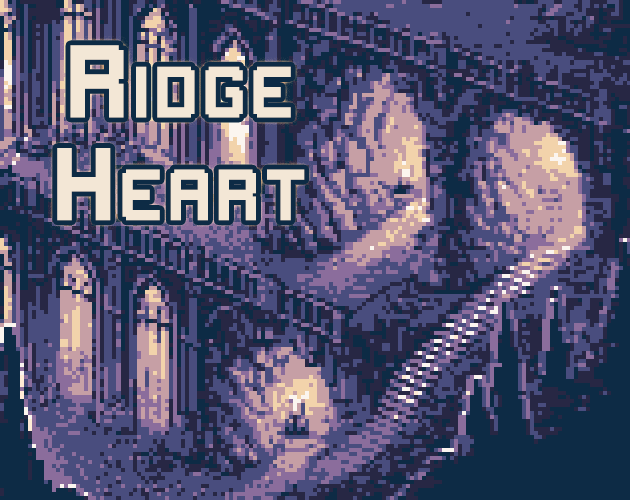
<style>
.page{position:relative;width:630px;height:500px;background:#494d7e}
.page>*{position:absolute;margin:0}
.t1{font:77px/51.3px "GAMEPLAY-1987";letter-spacing:0.1em;color:#f3e7d6;font-variant:small-caps}
</style>
<div class="page">
<p class="t1" style="left:57px;top:45px;width:248px;height:176px;text-align:center">Ridge<br> <br>Heart</p>
</div>
